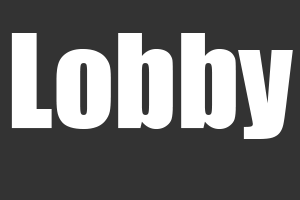
<style>
.page{position:relative;width:300px;height:200px;background:#333333}
.page>*{position:absolute;margin:0}
.t1{font:120px "Impact";color:#ffffff}
</style>
<div class="page">
<p class="t1" style="left:11px;top:33px;width:282px;height:106px">Lobby</p>
</div>
